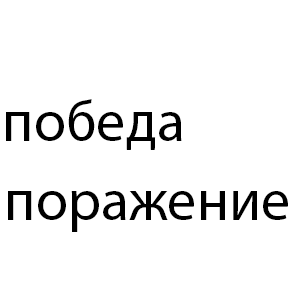
<style>
.page{position:relative;width:300px;height:300px;background:#ffffff}
.page>*{position:absolute;margin:0}
.t1{font:58.3px "MyriadPro-Regular";color:#000000}
</style>
<div class="page">
<p class="t1" style="left:6px;top:99px;width:176px;height:51px">победа</p>
<p class="t1" style="left:8px;top:191px;width:280px;height:41px">поражение</p>
</div>
